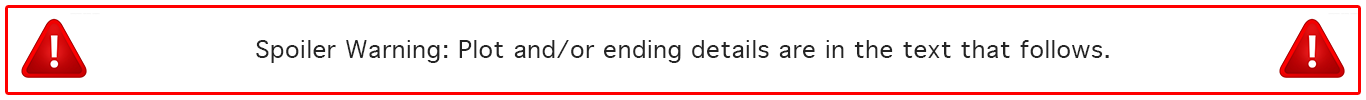
<style>
.page{position:relative;width:1366px;height:100px;background:#ffffff}
.page>*{position:absolute;margin:0}
.t1{font:24px "Geneva";letter-spacing:0.02em;color:#242424}
</style>
<div class="page">
<p class="t1" style="left:256px;top:40px;width:853px;height:23px">Spoiler Warning: Plot and/or ending details are in the text that follows.</p>
</div>
